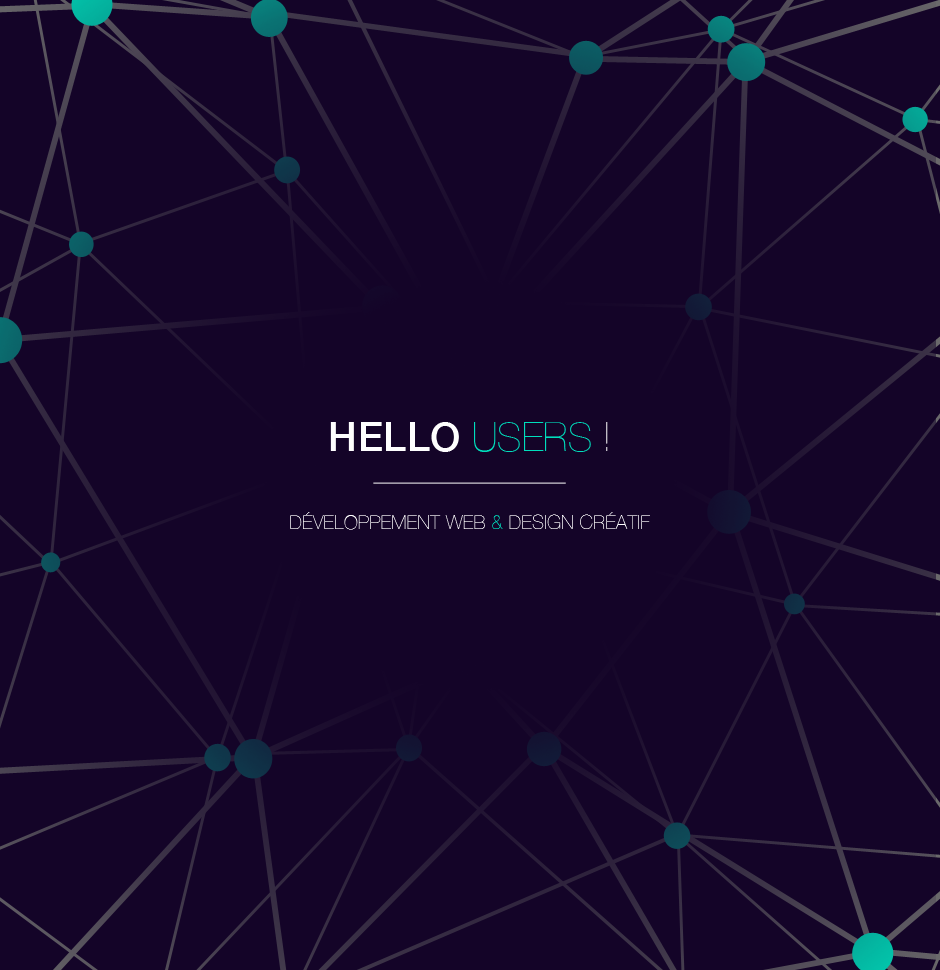
<style>
.page{position:relative;width:940px;height:970px;background:#140428}
.page>*{position:absolute;margin:0}
.t1{font:40px "HelveticaNeue-Medium";letter-spacing:0.01em;color:#fefefe;text-transform:uppercase}
.t2{font:40px "HelveticaNeue-UltraLight";color:#00debc;text-transform:uppercase}
.t3{font:40px "HelveticaNeue-UltraLight";color:#fefefe;text-transform:uppercase}
.t4{font:19px "HelveticaNeue-UltraLight";letter-spacing:0.025em;color:#ffffff;text-transform:uppercase}
.t5{font:19px "HelveticaNeue-UltraLight";letter-spacing:0.025em;color:#00debc;text-transform:uppercase}
</style>
<div class="page">
<p class="t1" style="left:330px;top:422px;width:278px;height:30px">HELLO <span class="t2">USERS </span><span class="t3">!</span></p>
<p class="t4" style="left:290px;top:512px;width:360px;height:18px">DÉVELOPPEMENT WEB <span class="t5">&amp;</span> DESIGN CRÉATIF</p>
</div>
